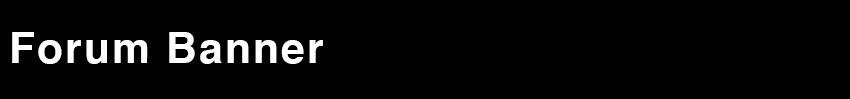
<style>
.page{position:relative;width:850px;height:99px;background:#010101}
.page>*{position:absolute;margin:0}
.t1{font:42.5px "Helvetica-Bold";letter-spacing:0.05em;color:#ffffff}
</style>
<div class="page">
<p class="t1" style="left:12px;top:32px;width:311px;height:32px">Forum Banner</p>
</div>
